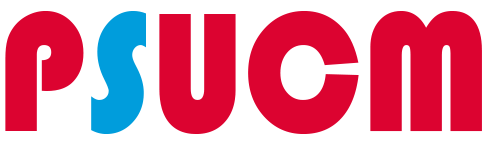
<style>
.page{position:relative;width:487px;height:144px;background:#dc0330}
.page>*{position:absolute;margin:0}
.t1{font:175px "Bauhaus93";color:#dc0330;scale:0.9 1}
.t2{font:175px "Bauhaus93";color:#009ddc;scale:0.9 1}
</style>
<div class="page">
<p class="t1" style="left:5px;top:11px;width:477px;height:123px">P<span class="t2">S</span>UCM</p>
</div>
